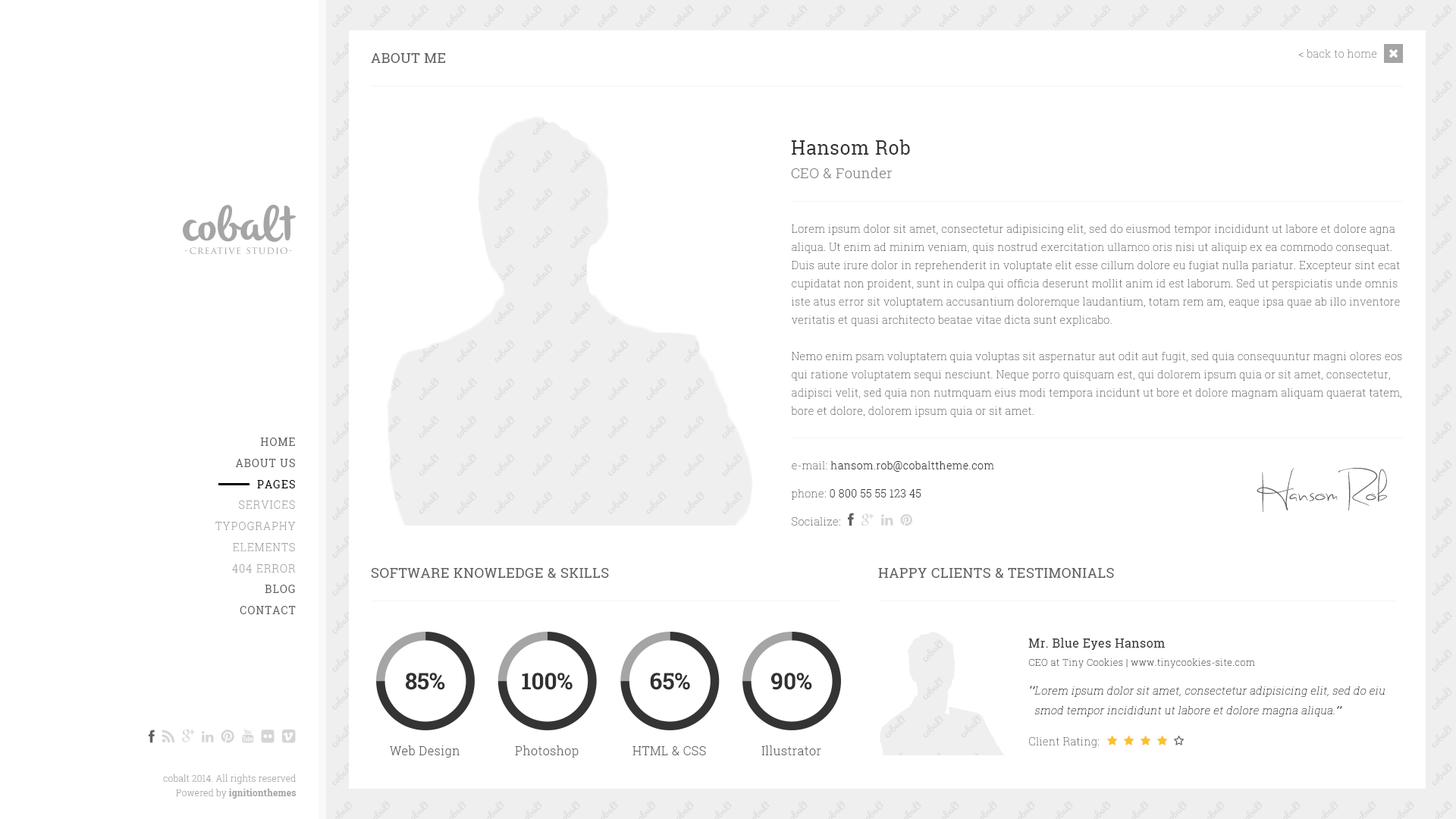
<style>
.page{position:relative;width:1456px;height:819px;background:#ffffff}
.page>*{position:absolute;margin:0}
.t1{font:13.6px "RobotoSlab-Regular";letter-spacing:0.03em;color:#606060;text-transform:uppercase}
.t2{font:10.6px "RobotoSlab-Thin";letter-spacing:0.03em;color:#808080}
.t3{font:13.6px/28.1px "RobotoSlab-Light";letter-spacing:0.03em;color:#808080}
.t4{font:19px/28.1px "RobotoSlab-Regular";letter-spacing:0.03em;color:#343434}
.t5{font:10.6px/18.2px "RobotoSlab-Thin";letter-spacing:0.03em;color:#606060}
.t6{font:10.6px/21.2px "RobotoSlab-Regular";letter-spacing:0.08em;color:#606060}
.t7{font:10.6px/21.2px "RobotoSlab-Regular";letter-spacing:0.08em;color:#000000}
.t8{font:10.6px/28.1px "RobotoSlab-Light";letter-spacing:0.03em;color:#343434}
.t9{font:10.6px/28.1px "RobotoSlab-Thin";letter-spacing:0.03em;color:#606060}
.t10{font:10.6px/28.1px "RobotoSlab-Light";letter-spacing:0.03em;color:#344334}
.t11{font:37.9px "SweetlyBroken";color:#606060}
.t12{font:10.6px/21.2px "RobotoSlab-Light";letter-spacing:0.08em;color:#a5a5a5}
.t13{font:9.1px/20.5px "RobotoSlab-Thin";letter-spacing:0.05em;color:#343434}
.t14{font:12.1px/20.5px "RobotoSlab-Regular";letter-spacing:0.03em;color:#343434}
.t15{font:22.7px "RobotoSlab-Bold";color:#2f3133}
.t16{font:10.6px/19.7px "RobotoSlab-Thin";letter-spacing:0.03em;color:#171717;font-style:italic}
.t17{font:10.6px "RobotoSlab-Thin";letter-spacing:0.03em;color:#606060}
.t18{font:12.1px "RobotoSlab-Light";letter-spacing:0.03em;color:#606060}
.t19{font:9.1px/14.4px "RobotoSlab-Light";letter-spacing:0.01em;color:#a5a5a5}
.t20{font:9.1px/14.4px "RobotoSlab-Bold";letter-spacing:0.01em;color:#a5a5a5}
</style>
<div class="page">
<p class="t1" style="left:371px;top:53px;width:75px;height:10px">ABOUT ME</p>
<p class="t2" style="left:1298px;top:49px;width:78px;height:9px">&lt; back to home</p>
<p class="t3" style="left:791px;top:140px;width:119px;height:38px"><span class="t4">Hansom Rob<br></span>CEO &amp; Founder</p>
<p class="t5" style="left:791px;top:224px;width:611px;height:193px">Lorem ipsum dolor sit amet, consectetur adipisicing elit, sed do eiusmod tempor incididunt ut labore et dolore agna aliqua. Ut enim ad minim veniam, quis nostrud exercitation ullamco oris nisi ut aliquip ex ea commodo consequat. Duis aute irure dolor in reprehenderit in voluptate elit esse cillum dolore eu fugiat nulla pariatur. Excepteur sint ecat cupidatat non proident, sunt in culpa qui officia deserunt mollit anim id est laborum. Sed ut perspiciatis unde omnis iste atus error sit voluptatem accusantium doloremque laudantium, totam rem am, eaque ipsa quae ab illo inventore veritatis et quasi architecto beatae vitae dicta sunt explicabo. <br><br>Nemo enim psam voluptatem quia voluptas sit aspernatur aut odit aut fugit, sed quia consequuntur magni olores eos qui ratione voluptatem sequi nesciunt. Neque porro quisquam est, qui dolorem ipsum quia or sit amet, consectetur, adipisci velit, sed quia non nutmquam eius modi tempora incidunt ut bore et dolore magnam aliquam quaerat tatem, bore et dolore, dolorem ipsum quia or sit amet.</p>
<p class="t6" style="left:235px;top:438px;width:60px;height:50px;text-align:right">HOME<br>ABOUT US<br><span class="t7">PAGES</span></p>
<p class="t8" style="left:792px;top:461px;width:202px;height:65px"><span class="t9">e-mail: </span>hansom.rob@cobalttheme.com<br><span class="t9">phone: </span><span class="t10">0 800 55 55 123 45<br></span><span class="t9">Socialize:</span></p>
<p class="t11" style="left:1257px;top:468px;width:131px;height:45px">Hansom Rob</p>
<p class="t12" style="left:215px;top:500px;width:81px;height:73px;text-align:right">SERVICES<br>TYPOGRAPHY<br>ELEMENTS<br>404 ERROR</p>
<p class="t1" style="left:371px;top:568px;width:238px;height:10px">SOFTWARE KNOWLEDGE &amp; SKILLS</p>
<p class="t1" style="left:878px;top:568px;width:236px;height:10px">HAPPy clients &amp; TEstimonials</p>
<p class="t6" style="left:240px;top:585px;width:56px;height:29px;text-align:right">BLOG<br>CONTACT</p>
<p class="t13" style="left:1028px;top:638px;width:227px;height:30px"><span class="t14">Mr. Blue Eyes Hansom<br></span>CEO at Tiny Cookies | www.tinycookies-site.com</p>
<p class="t15" style="left:406px;top:673px;width:39px;height:17px">85%</p>
<p class="t15" style="left:522px;top:673px;width:51px;height:17px">100%</p>
<p class="t15" style="left:650px;top:673px;width:40px;height:17px">65%</p>
<p class="t15" style="left:771px;top:673px;width:41px;height:17px">90%</p>
<p class="t16" style="left:1030px;top:686px;width:355px;height:31px">“”Lorem ipsum dolor sit amet, consectetur adipisicing elit, sed do eiu<br>  smod tempor incididunt ut labore et dolore magna aliqua.””</p>
<p class="t17" style="left:1029px;top:737px;width:70px;height:11px">Client Rating:</p>
<p class="t18" style="left:390px;top:745px;width:70px;height:13px">Web Design</p>
<p class="t18" style="left:515px;top:745px;width:64px;height:13px">Photoshop</p>
<p class="t18" style="left:632px;top:746px;width:74px;height:9px">HTML &amp; CSS</p>
<p class="t18" style="left:761px;top:745px;width:60px;height:10px">Illustrator</p>
<p class="t19" style="left:163px;top:774px;width:133px;height:25px;text-align:right">cobalt 2014. All rights reserved<br>Powered by <span class="t20">ignitionthemes</span></p>
</div>
